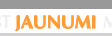
<style>
.page{position:relative;width:112px;height:36px;background:#ffffff}
.page>*{position:absolute;margin:0}
.t1{font:18px "RimOptima-Bold";color:#ff9933}
</style>
<div class="page">
<p class="t1" style="left:15px;top:15px;width:80px;height:16px">JAUNUMI</p>
</div>
